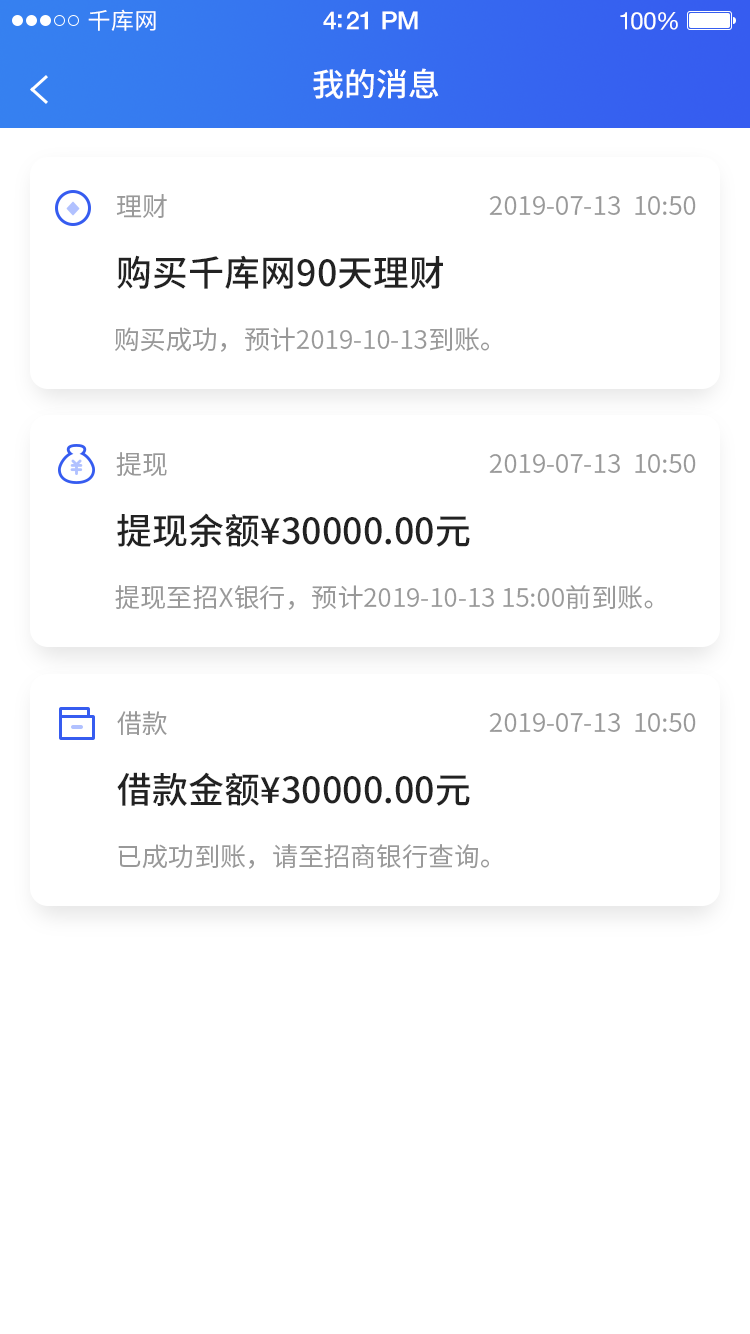
<style>
.page{position:relative;width:750px;height:1334px;background:#ffffff}
.page>*{position:absolute;margin:0}
.t1{font:23px "SourceHanSansCN-Regular";letter-spacing:0.02em;color:#ffffff}
.t2{font:25px "HelveticaNeue-Medium";letter-spacing:-0.02em;color:#ffffff}
.t3{font:24px "HelveticaNeue";letter-spacing:-0.02em;color:#ffffff}
.t4{font:32px "SourceHanSansCN-Medium";color:#ffffff}
.t5{font:26px "SourceHanSansCN-Normal";color:#999999}
.t6{font:36px "SourceHanSansCN-Medium";color:#222222}
</style>
<div class="page">
<p class="t1" style="left:88px;top:9px;width:68px;height:22px">千库网</p>
<p class="t2" style="left:323px;top:11px;width:95px;height:19px">4:21 PM</p>
<p class="t3" style="left:620px;top:12px;width:58px;height:18px">100%</p>
<p class="t4" style="left:313px;top:68px;width:126px;height:31px">我的消息</p>
<p class="t5" style="left:116px;top:194px;width:51px;height:24px">理财</p>
<p class="t5" style="left:489px;top:196px;width:207px;height:19px">2019-07-13  10:50</p>
<p class="t6" style="left:117px;top:255px;width:326px;height:34px">购买千库网90天理财</p>
<p class="t5" style="left:115px;top:327px;width:374px;height:25px">购买成功，预计2019-10-13到账。</p>
<p class="t5" style="left:116px;top:452px;width:51px;height:25px">提现</p>
<p class="t5" style="left:489px;top:454px;width:207px;height:19px">2019-07-13  10:50</p>
<p class="t6" style="left:117px;top:513px;width:353px;height:34px">提现余额¥30000.00元</p>
<p class="t5" style="left:115px;top:585px;width:538px;height:25px">提现至招X银行，预计2019-10-13 15:00前到账。</p>
<p class="t5" style="left:117px;top:711px;width:50px;height:24px">借款</p>
<p class="t5" style="left:489px;top:713px;width:207px;height:19px">2019-07-13  10:50</p>
<p class="t6" style="left:117px;top:772px;width:353px;height:34px">借款金额¥30000.00元</p>
<p class="t5" style="left:118px;top:844px;width:371px;height:25px">已成功到账，请至招商银行查询。</p>
</div>
